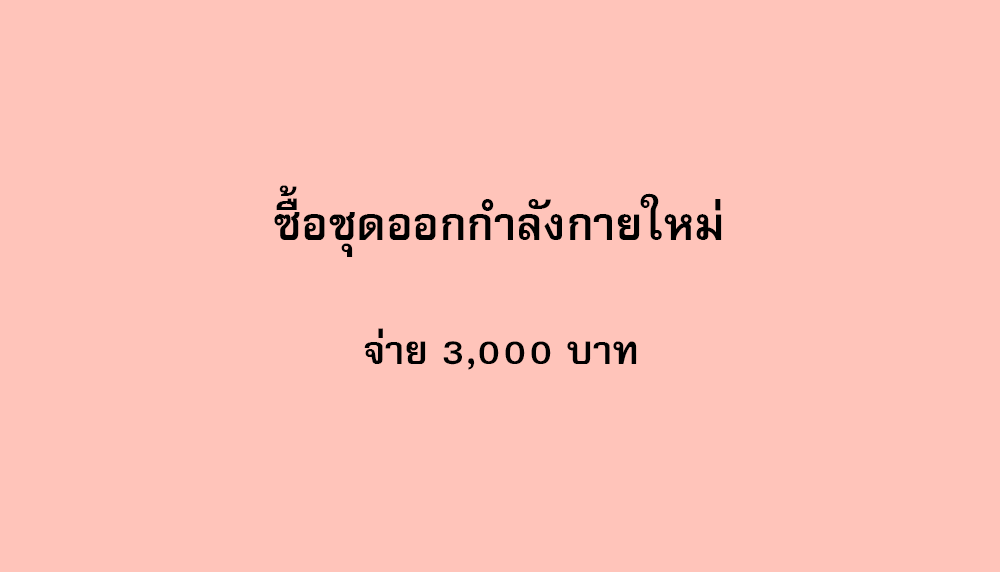
<style>
.page{position:relative;width:1000px;height:572px;background:#ffc4ba}
.page>*{position:absolute;margin:0}
.t1{font:64px "FreesiaUPCBold";color:#000000}
.t2{font:56px "FreesiaUPCBold";color:#000000}
</style>
<div class="page">
<p class="t1" style="left:274px;top:185px;width:448px;height:72px">ซื้อชุดออกกำลังกายใหม่</p>
<p class="t2" style="left:364px;top:328px;width:273px;height:42px">จ่าย 3,000 บาท</p>
</div>
